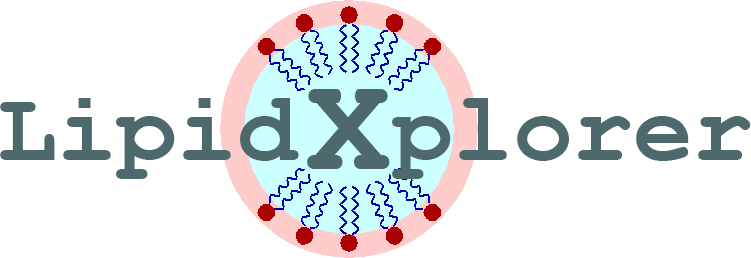
<style>
.page{position:relative;width:751px;height:258px;background:#ffffff}
.page>*{position:absolute;margin:0}
.t1{font:140px "CourierNewPS-BoldMT";color:#4d696c}
.t2{font:100px "CourierNewPS-BoldMT";color:#4d696c}
</style>
<div class="page">
<p class="t1" style="left:307px;top:89px;width:83px;height:80px">X</p>
<p class="t2" style="left:0px;top:98px;width:299px;height:81px">Lipid</p>
<p class="t2" style="left:392px;top:98px;width:359px;height:81px">plorer</p>
</div>
